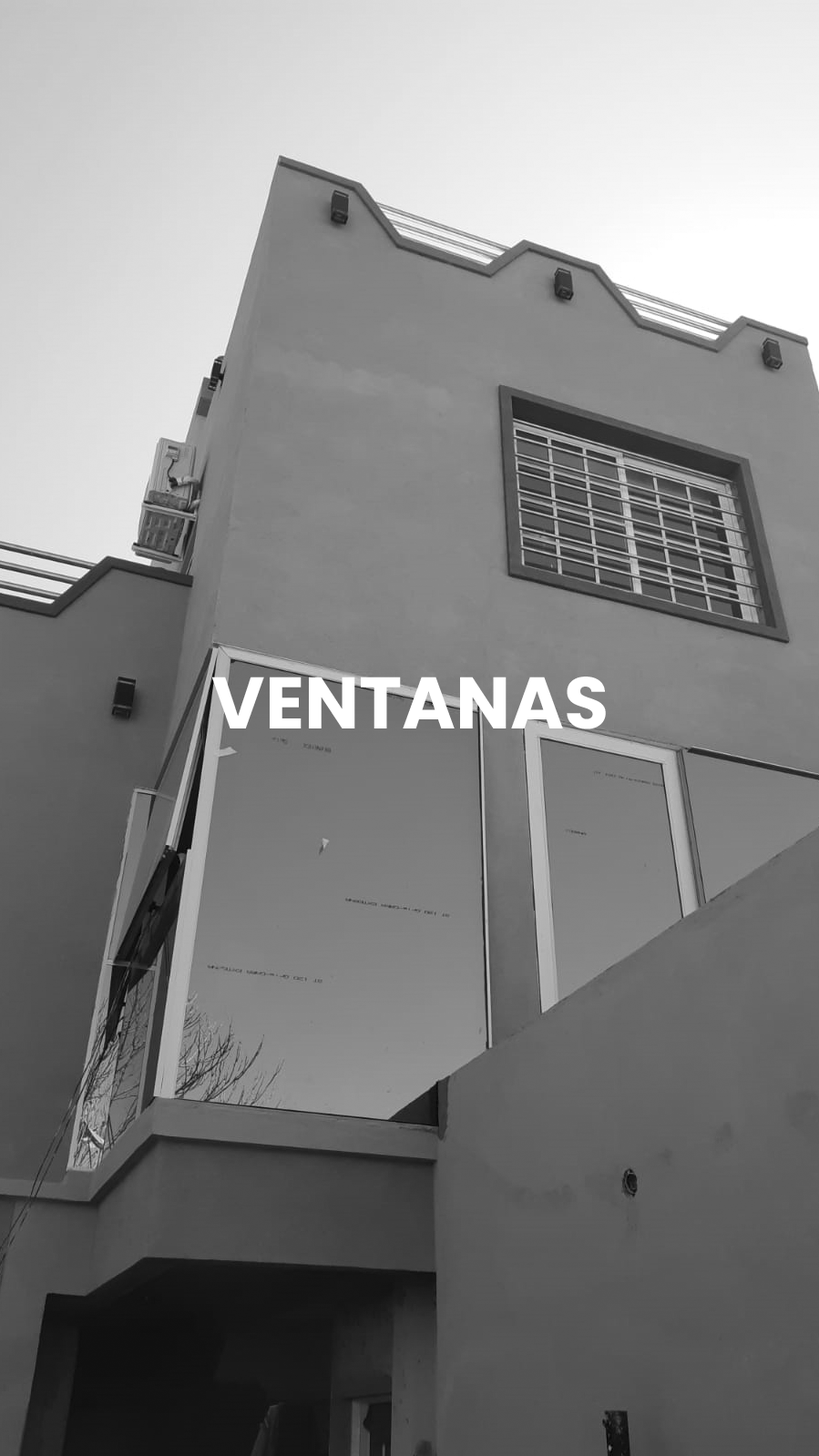
<style>
.page{position:relative;width:819px;height:1456px}
.page>*{position:absolute;margin:0}
.t1{font:72.9px "Poppins-Bold";color:#ffffff}
</style>
<div class="page">
<p class="t1" style="left:211px;top:677px;width:395px;height:53px">VENTANAS</p>
</div>
